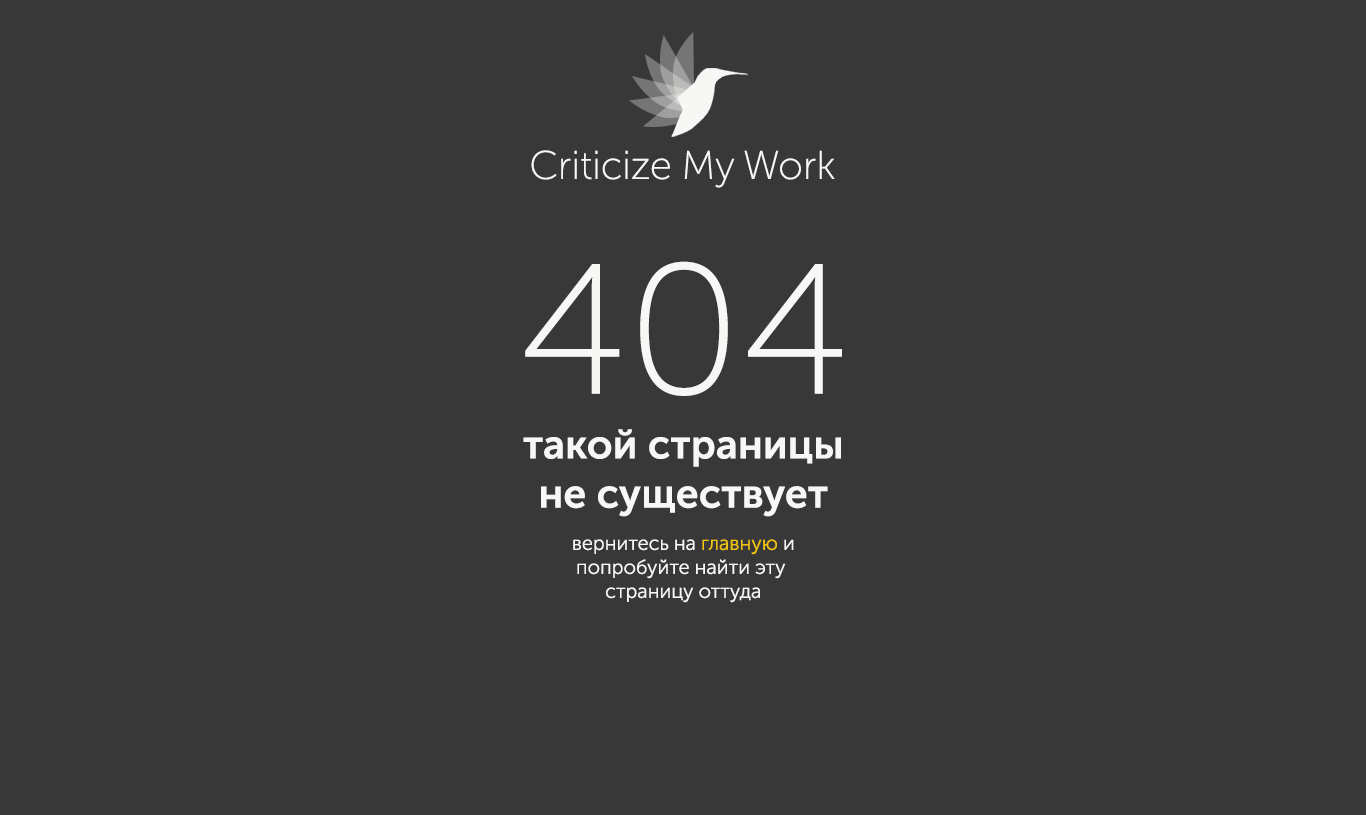
<style>
.page{position:relative;width:1366px;height:815px;background:#383838}
.page>*{position:absolute;margin:0}
.t1{font:40px "MuseoSansCyrl-100";color:#f7f7f5}
.t2{font:185px "MuseoSansCyrl-100";color:#f7f7f5;text-transform:uppercase}
.t3{font:41px "MuseoSansCyrl-700";color:#f7f7f5}
.t4{font:20px "MuseoSansCyrl-300";color:#f7f7f5}
.t5{font:20px "MuseoSansCyrl-300";color:#f1c40f}
</style>
<div class="page">
<p class="t1" style="left:531px;top:150px;width:304px;height:38px">Criticize My Work</p>
<p class="t2" style="left:525px;top:261px;width:317px;height:135px">404</p>
<p class="t3" style="left:523px;top:429px;width:318px;height:88px;text-align:center">такой страницы<br>не существует</p>
<p class="t4" style="left:573px;top:539px;width:221px;height:64px;text-align:center">вернитесь на <span class="t5">главную</span> и<br>попробуйте найти эту <br>страницу оттуда</p>
</div>
